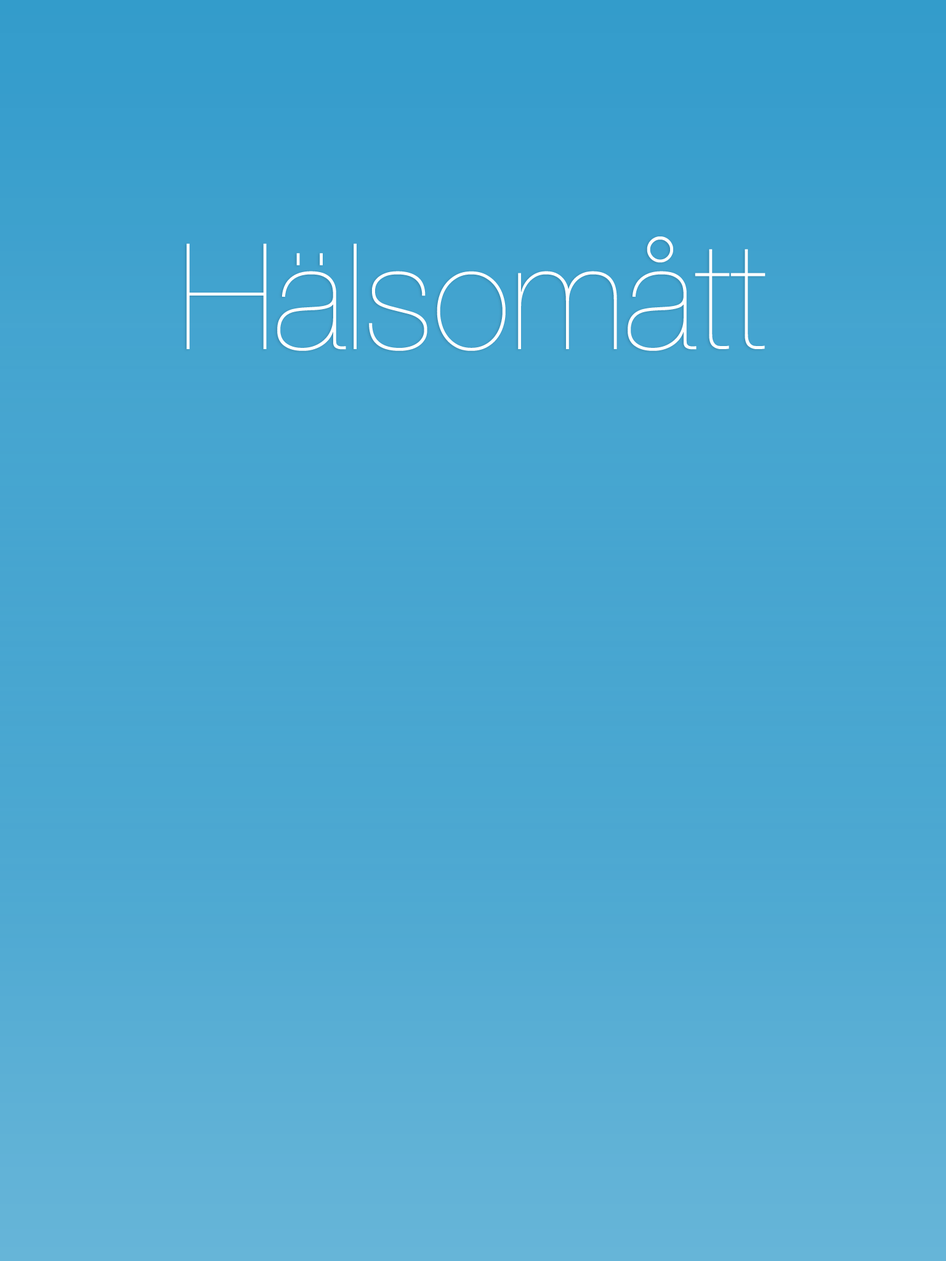
<style>
.page{position:relative;width:946px;height:1261px}
.page>*{position:absolute;margin:0}
.t1{font:147.8px "HelveticaNeue-UltraLight";color:#ffffff}
</style>
<div class="page">
<p class="t1" style="left:187px;top:236px;width:578px;height:115px">Hälsomått</p>
</div>
